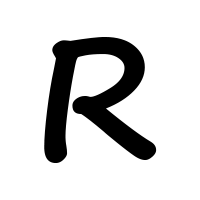
<style>
.page{position:relative;width:200px;height:200px;background:#ffffff}
.page>*{position:absolute;margin:0}
.t1{font:170px "SegoePrint-Bold";color:#000000}
</style>
<div class="page">
<p class="t1" style="left:44px;top:37px;width:113px;height:126px">R</p>
</div>
